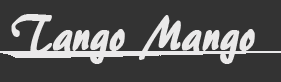
<style>
.page{position:relative;width:281px;height:82px;background:#333333}
.page>*{position:absolute;margin:0}
.t1{font:50.3px "ARBERKLEY";color:#eae9e9;font-weight:bold;scale:0.8 1}
</style>
<div class="page">
<p class="t1" style="left:11px;top:14px;width:244px;height:50px">Tango Mango</p>
</div>
